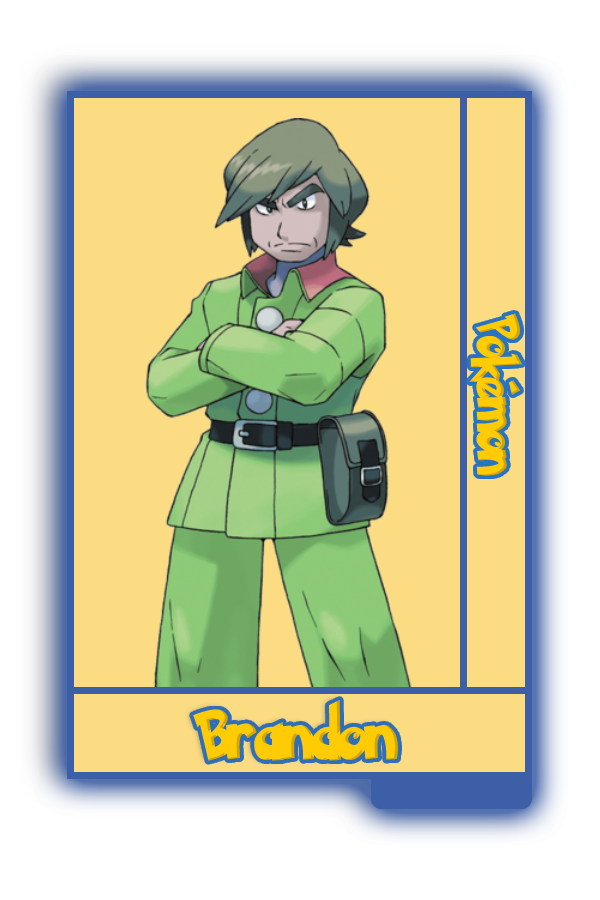
<style>
.page{position:relative;width:600px;height:900px;background:#fbdc83}
.page>*{position:absolute;margin:0}
.t1{font:48.8px "PokemonSolidNormal";color:#ffcb05;scale:0.8 1}
.t2{font:56.6px "PokemonSolidNormal";color:#ffcb05;scale:0.92 1}
</style>
<div class="page">
<p class="t1" style="left:469px;top:313px;width:54px;height:163px;rotate:90deg">Pokémon</p>
<p class="t2" style="left:193px;top:699px;width:206px;height:62px">Brandon</p>
</div>
